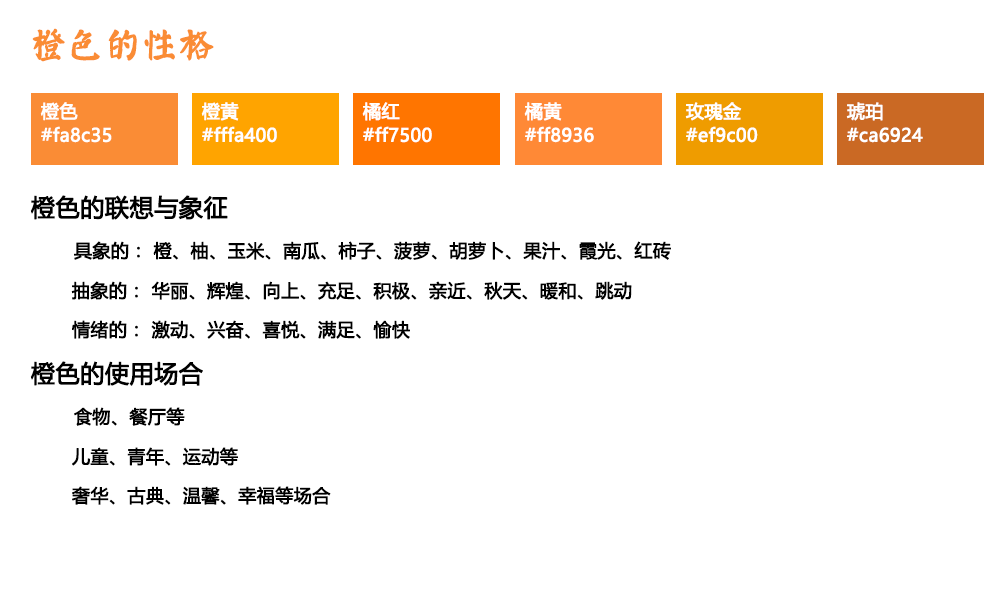
<style>
.page{position:relative;width:1000px;height:600px;background:#ffffff}
.page>*{position:absolute;margin:0}
.t1{font:36px "øów·»îów©I";color:#fa8c35;font-weight:bold}
.t2{font:18px/24px "MicrosoftYaHei";color:#ffffff;font-weight:bold}
.t3{font:24px "MicrosoftYaHei";color:#000000;font-weight:bold}
.t4{font:18px "MicrosoftYaHei";color:#000000;font-weight:bold}
</style>
<div class="page">
<p class="t1" style="left:32px;top:28px;width:182px;height:34px">橙色的性格</p>
<p class="t2" style="left:40px;top:102px;width:72px;height:41px">橙色<br>#fa8c35</p>
<p class="t2" style="left:201px;top:102px;width:76px;height:41px">橙黄<br>#fffa400</p>
<p class="t2" style="left:362px;top:102px;width:70px;height:41px">橘红<br>#ff7500</p>
<p class="t2" style="left:524px;top:102px;width:70px;height:41px">橘黄<br>#ff8936</p>
<p class="t2" style="left:685px;top:102px;width:73px;height:41px">玫瑰金<br>#ef9c00</p>
<p class="t2" style="left:846px;top:102px;width:77px;height:41px">琥珀<br>#ca6924</p>
<p class="t3" style="left:30px;top:195px;width:198px;height:25px">橙色的联想与象征</p>
<p class="t4" style="left:74px;top:241px;width:597px;height:19px">具象的： 橙、柚、玉米、南瓜、柿子、菠萝、胡萝卜、果汁、霞光、红砖</p>
<p class="t4" style="left:71px;top:281px;width:561px;height:19px">抽象的： 华丽、辉煌、向上、充足、积极、亲近、秋天、暖和、跳动</p>
<p class="t4" style="left:72px;top:320px;width:338px;height:19px">情绪的： 激动、兴奋、喜悦、满足、愉快</p>
<p class="t3" style="left:30px;top:361px;width:173px;height:25px">橙色的使用场合</p>
<p class="t4" style="left:74px;top:407px;width:111px;height:19px">食物、餐厅等</p>
<p class="t4" style="left:72px;top:447px;width:166px;height:19px">儿童、青年、运动等</p>
<p class="t4" style="left:72px;top:486px;width:259px;height:19px">奢华、古典、温馨、幸福等场合</p>
</div>
